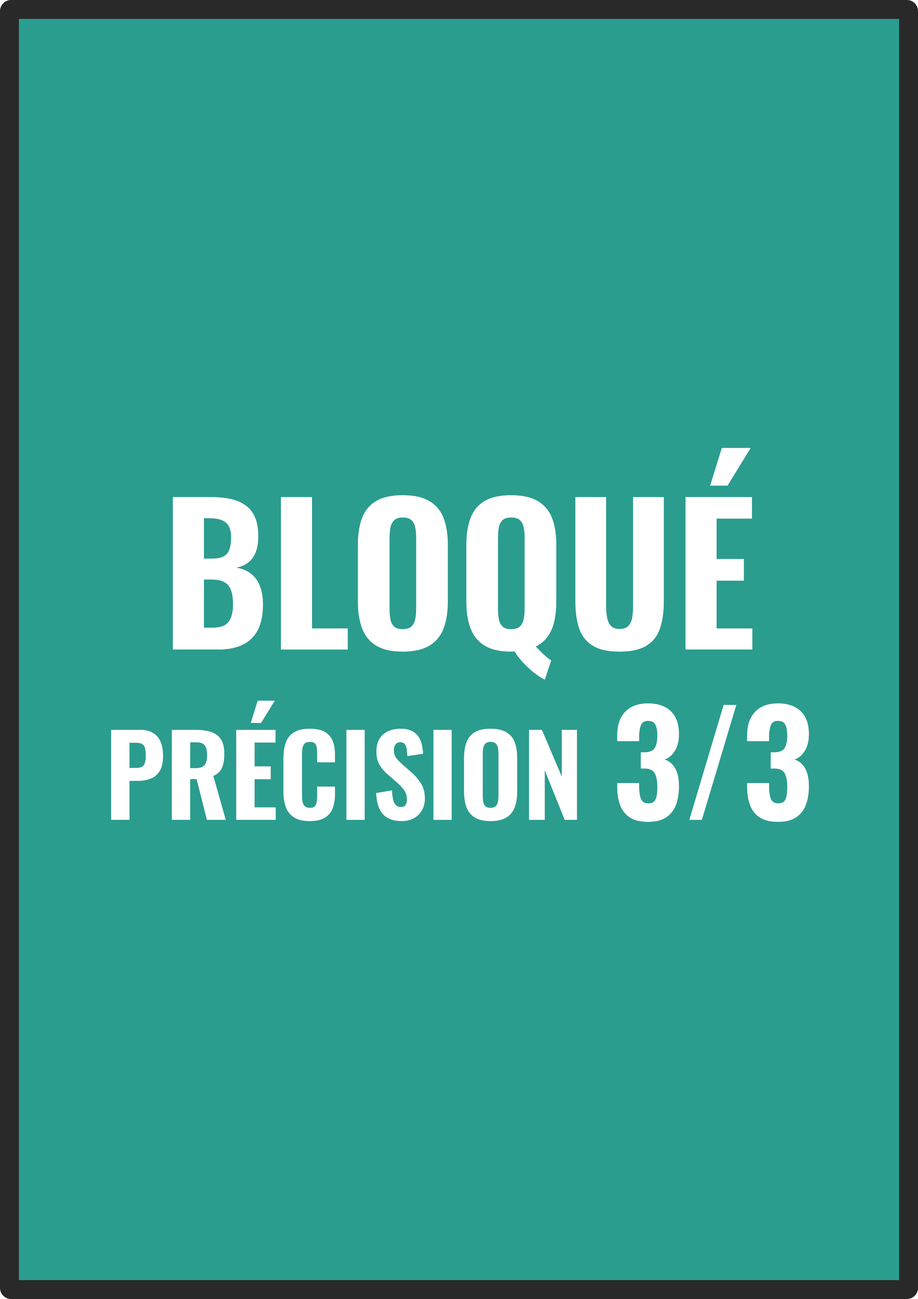
<style>
.page{position:relative;width:918px;height:1299px;background:#2a9d8f}
.page>*{position:absolute;margin:0}
.t1{font:111.1px "Oswald-SemiBold";color:#ffffff}
.t2{font:188.2px "Oswald-SemiBold";color:#ffffff}
.t3{font:141.9px "Oswald-SemiBold";color:#ffffff}
</style>
<div class="page">
<p class="t1" style="left:111px;top:448px;width:698px;height:374px;text-align:center"><span class="t2">BLOQUÉ<br></span>PRÉCISION <span class="t3">3/3</span></p>
</div>
